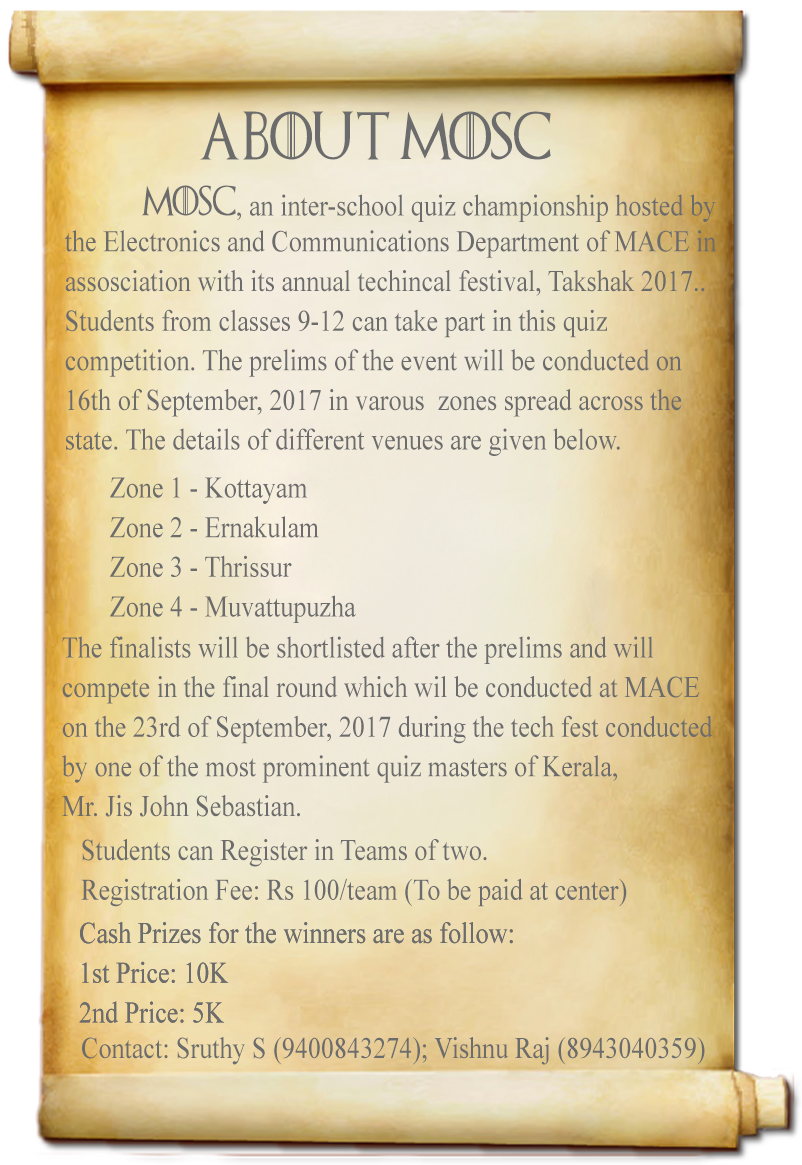
<style>
.page{position:relative;width:802px;height:1165px}
.page>*{position:absolute;margin:0}
.t1{font:48px "GameofThrones";color:#6c6c6c;scale:0.87 1}
.t2{font:30px "TimesNewRomanPSMT";color:#6c6c6c;scale:0.87 1}
.t3{font:30px "GameofThrones";color:#6c6c6c;scale:0.87 1}
.t4{font:30px/39.6px "TimesNewRomanPSMT";color:#6c6c6c;scale:0.87 1}
.t5{font:30.1px/39.8px "TimesNewRomanPSMT";color:#6c6c6c;scale:0.87 1}
.t6{font:30.1px "TimesNewRomanPSMT";color:#6c6c6c;scale:0.87 1}
</style>
<div class="page">
<p class="t1" style="left:200px;top:111px;width:351px;height:49px">About Mosc</p>
<p class="t2" style="left:142px;top:185px;width:574px;height:37px"><span class="t3">MOSC</span>, an inter-school quiz championship hosted by</p>
<p class="t4" style="left:64px;top:230px;width:653px;height:226px">the Electronics and Communications Department of MACE in<br>assosciation with its annual techincal festival, Takshak 2017.. <br>Students from classes 9-12 can take part in this quiz <br>competition. The prelims of the event will be conducted on <br>16th of September, 2017 in varous  zones spread across the <br>state. The details of different venues are given below.</p>
<p class="t4" style="left:110px;top:477px;width:246px;height:146px">Zone 1 - Kottayam<br>Zone 2 - Ernakulam<br>Zone 3 - Thrissur<br>Zone 4 - Muvattupuzha</p>
<p class="t4" style="left:62px;top:636px;width:651px;height:181px">The finalists will be shortlisted after the prelims and will<br>compete in the final round which wil be conducted at MACE<br>on the 23rd of September, 2017 during the tech fest conducted<br>by one of the most prominent quiz masters of Kerala, <br>Mr. Jis John Sebastian.</p>
<p class="t5" style="left:81px;top:839px;width:546px;height:68px">Students can Register in Teams of two.<br>Registration Fee: Rs 100/team (To be paid at center)</p>
<p class="t5" style="left:79px;top:922px;width:434px;height:101px">Cash Prizes for the winners are as follow:<br>1st Price: 10K<br>2nd Price: 5K</p>
<p class="t5" style="left:79px;top:922px;width:434px;height:101px">Cash Prizes for the winners are as follow:<br>1st Price: 10K<br>2nd Price: 5K</p>
<p class="t6" style="left:82px;top:1037px;width:623px;height:28px">Contact: Sruthy S (9400843274); Vishnu Raj (8943040359)</p>
</div>
